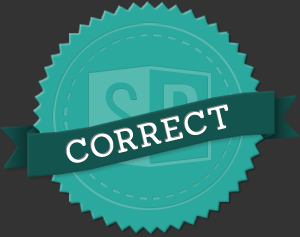
<style>
.page{position:relative;width:300px;height:237px;background:#333333}
.page>*{position:absolute;margin:0}
.t1{font:31.5px "Sanchez-Regular";letter-spacing:0.04em;color:#ffffff;font-weight:bold}
</style>
<div class="page">
<p class="t1" style="left:65px;top:103px;width:164px;height:60px;rotate:-13deg">CORRECT</p>
</div>
